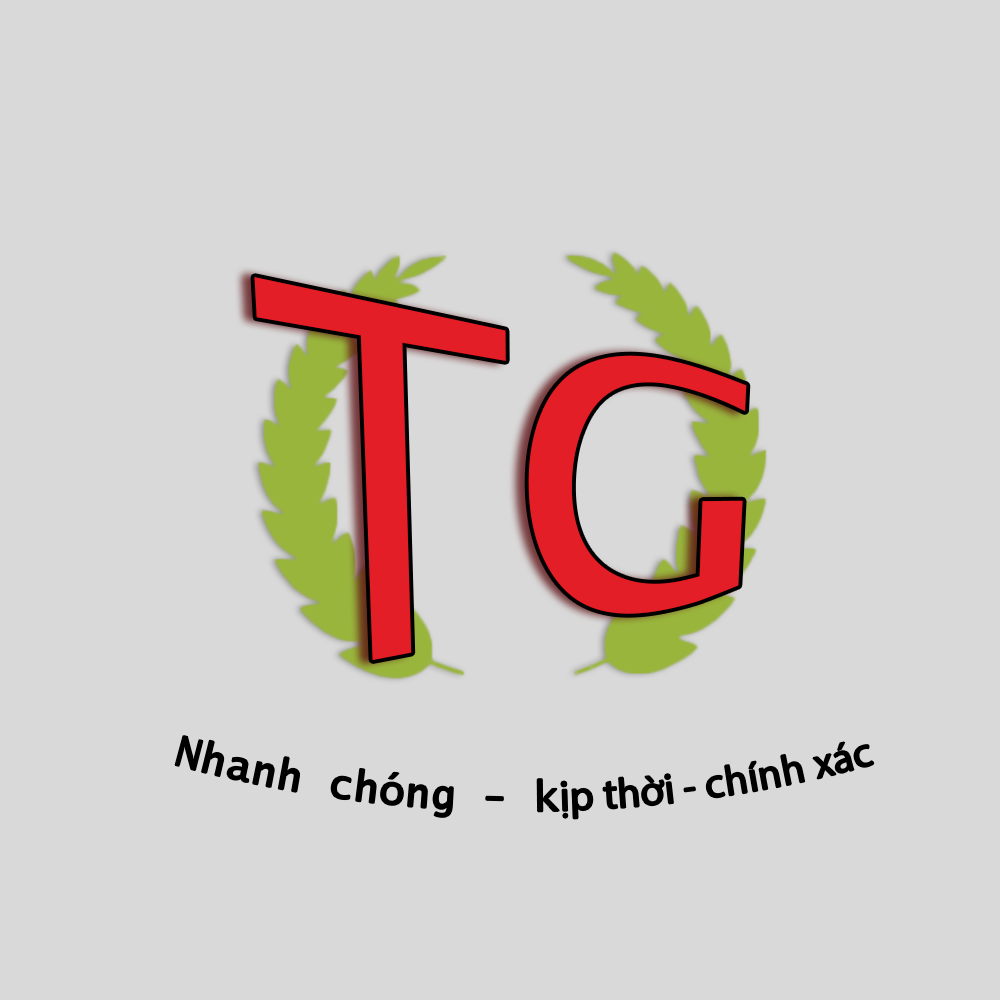
<style>
.page{position:relative;width:1000px;height:1000px;background:#d9d9d9}
.page>*{position:absolute;margin:0}
.t1{font:416.7px "LucidaSans-Typewriter";color:#e41e26}
.t2{font:41.7px "MyriadPro-Regular";color:#000000}
.t3{font:41.7px "LucidaSans-Typewriter";color:#000000}
</style>
<div class="page">
<p class="t1" style="left:254px;top:277px;width:493px;height:383px">TG</p>
<p class="t2" style="left:175px;top:736px;width:699px;height:83px"><span class="t3">Nhanh chóng - k</span>ịp thời - chính xác</p>
</div>
